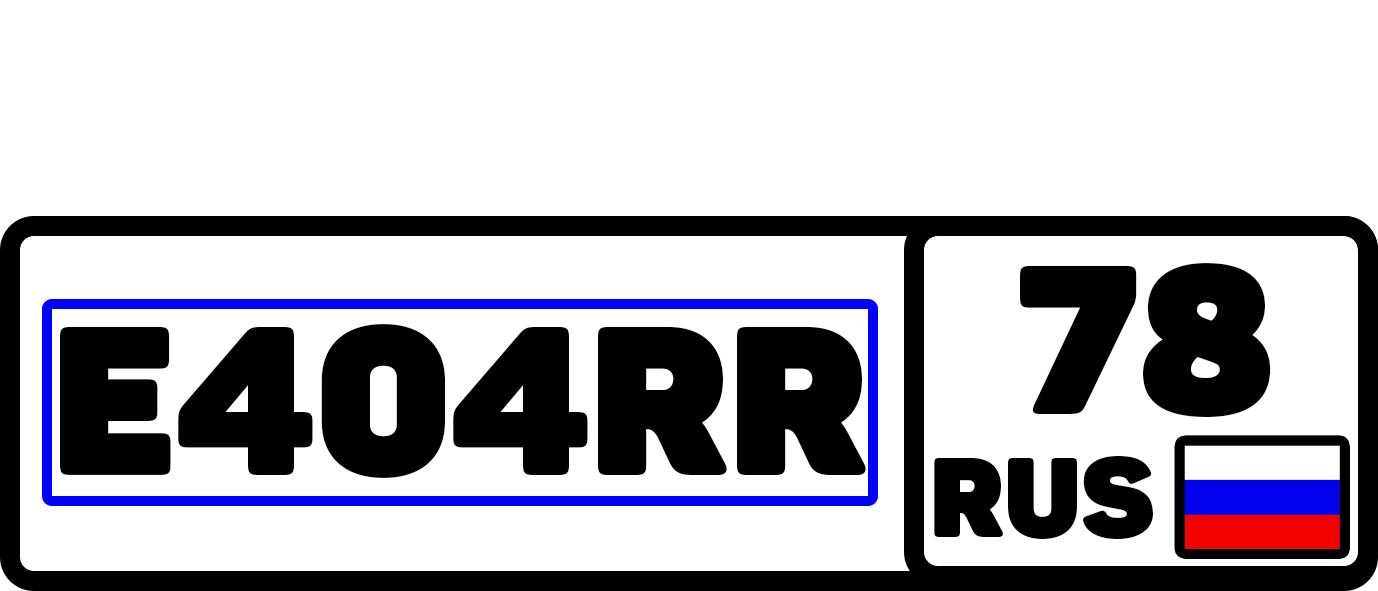
<style>
.page{position:relative;width:1378px;height:591px;background:#ffffff}
.page>*{position:absolute;margin:0}
.t1{font:208.3px "Panton-ExtraBlack";color:#000000;text-transform:uppercase}
.t2{font:111.1px "Panton-ExtraBlack";color:#000000;text-transform:uppercase}
</style>
<div class="page">
<p class="t1" style="left:1020px;top:263px;width:251px;height:154px">78</p>
<p class="t1" style="left:60px;top:324px;width:806px;height:154px">E404RR</p>
<p class="t2" style="left:934px;top:455px;width:219px;height:84px">RUS</p>
</div>
